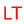
<style>
.page{position:relative;width:24px;height:24px;background:#ffffff}
.page>*{position:absolute;margin:0}
.t1{font:18px "ZHSRXT--GBK1-0";color:#f40604;font-weight:bold}
</style>
<div class="page">
<p class="t1" style="left:4px;top:6px;width:19px;height:14px">LT</p>
</div>
